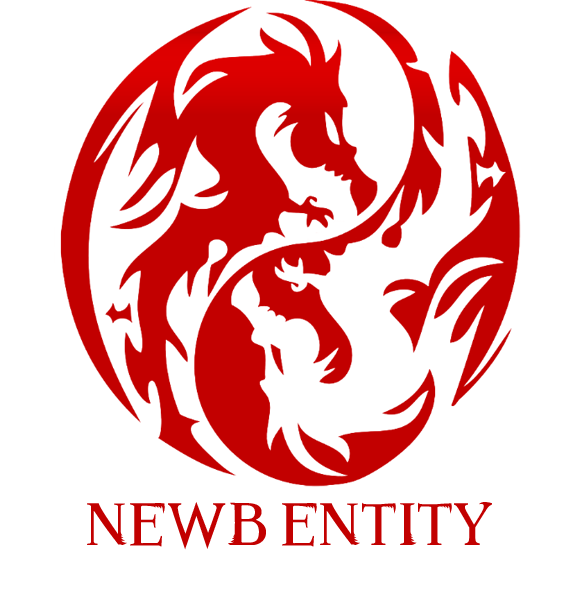
<style>
.page{position:relative;width:575px;height:600px;background:#ffffff}
.page>*{position:absolute;margin:0}
.t1{font:50px "AnimalesFantastic";color:#c20000}
</style>
<div class="page">
<p class="t1" style="left:87px;top:502px;width:405px;height:48px">NEWB ENTITY</p>
</div>
